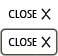
<style>
.page{position:relative;width:58px;height:56px;background:#ffffff}
.page>*{position:absolute;margin:0}
.t1{font:12px "LigurinoCondensed";letter-spacing:0.05em;color:#000000}
</style>
<div class="page">
<p class="t1" style="left:8px;top:10px;width:29px;height:8px">CLOSE</p>
<p class="t1" style="left:8px;top:38px;width:29px;height:8px">CLOSE</p>
</div>
